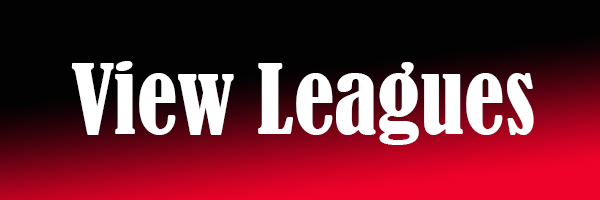
<style>
.page{position:relative;width:600px;height:200px;background:#020202}
.page>*{position:absolute;margin:0}
.t1{font:90px "BernardMT-Condensed";color:#ffffff}
</style>
<div class="page">
<p class="t1" style="left:71px;top:61px;width:463px;height:84px">View Leagues</p>
</div>
